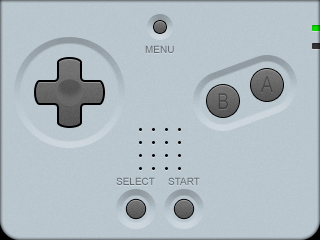
<style>
.page{position:relative;width:320px;height:240px;background:#b8c5cd}
.page>*{position:absolute;margin:0}
.t1{font:10px "ArialMT";color:#646c70}
.t2{font:22px "ArialNarrow";color:#474747}
.t3{font:22px "ArialNarrow";color:#484848}
.t4{font:10px "ArialMT";color:#656c71}
</style>
<div class="page">
<p class="t1" style="left:145px;top:45px;width:29px;height:8px">MENU</p>
<p class="t2" style="left:261px;top:76px;width:12px;height:16px">A</p>
<p class="t3" style="left:218px;top:93px;width:10px;height:16px">B</p>
<p class="t1" style="left:116px;top:177px;width:39px;height:8px">SELECT</p>
<p class="t4" style="left:168px;top:177px;width:32px;height:8px">START</p>
</div>
